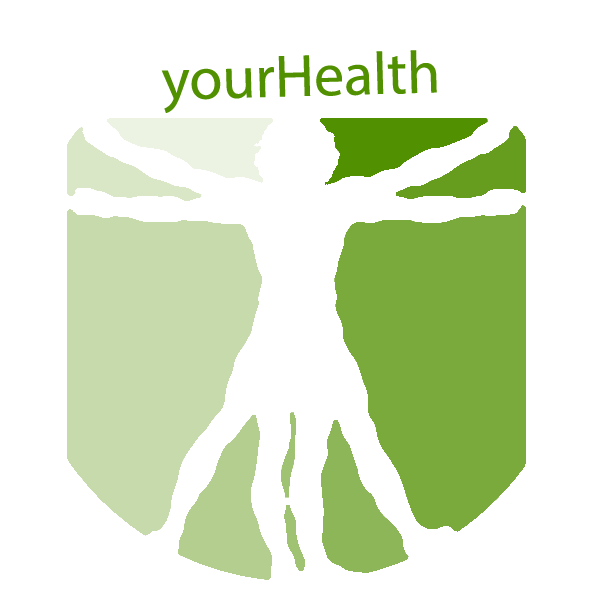
<style>
.page{position:relative;width:600px;height:600px;background:#ffffff}
.page>*{position:absolute;margin:0}
.t1{font:60px "MyriadPro-Regular";color:#519000}
</style>
<div class="page">
<p class="t1" style="left:161px;top:50px;width:276px;height:63px;rotate:-2deg">yourHealth</p>
</div>
